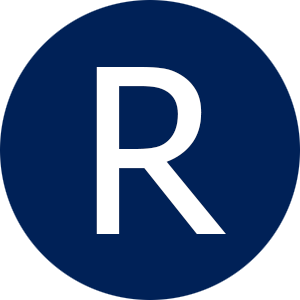
<style>
.page{position:relative;width:300px;height:300px;background:#002157}
.page>*{position:absolute;margin:0}
.t1{font:229.2px "Tahoma";color:#ffffff}
</style>
<div class="page">
<p class="t1" style="left:96px;top:67px;width:130px;height:167px">R</p>
</div>
